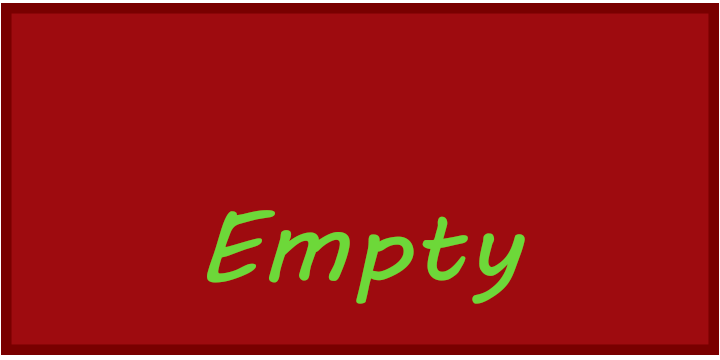
<style>
.page{position:relative;width:720px;height:360px;background:#9e0b0f}
.page>*{position:absolute;margin:0}
.t1{font:100px "MVBoli";color:#6dd839;scale:1.06 1}
</style>
<div class="page">
<p class="t1" style="left:207px;top:210px;width:318px;height:94px">Empty</p>
</div>
